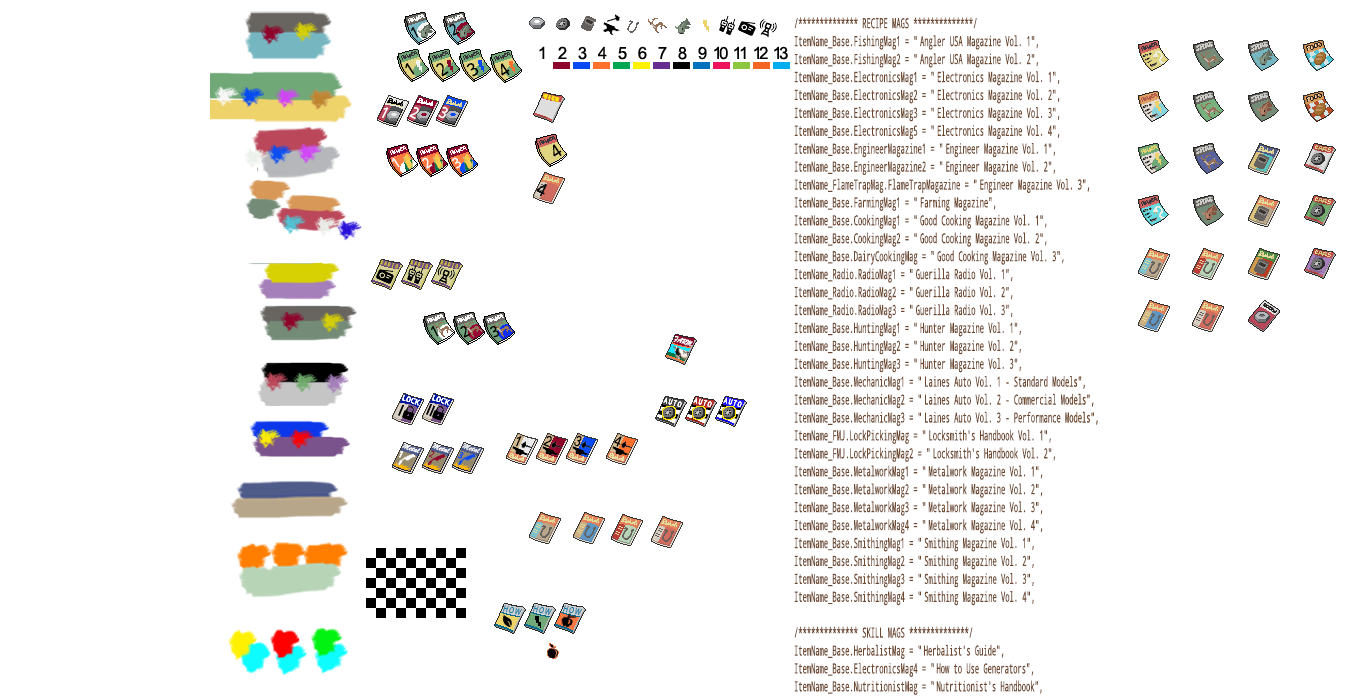
<style>
.page{position:relative;width:1362px;height:700px;background:#ffffff}
.page>*{position:absolute;margin:0}
.t1{font:14px/9px "NotoMono";color:#6e492f;scale:0.51 1}
.t2{font:15.4px "NotoMono";color:#000000;scale:0.9 1}
.t3{font:18.1px "NotoMono";color:#000000;scale:0.9 1}
.t4{font:5.1px "NotoMono";letter-spacing:0.3em;color:#fff000;scale:0.63 1}
.t5{font:5.7px "NotoMono";letter-spacing:0.46em;color:#fff000;scale:0.63 1}
.t6{font:15.5px "NotoMono";color:#ffffff;scale:0.9 1}
.t7{font:14.6px "NotoMono";color:#fbfcfa;scale:0.9 1}
.t8{font:5.7px "NotoMono";letter-spacing:0.46em;color:#d7cc1c;scale:0.63 1}
.t9{font:8.6px "BrushScriptMT";color:#ffffff;scale:0.81 1}
.t10{font:14.9px "ArialNarrow";color:#000000}
.t11{font:8.7px "BrushScriptMT";color:#ffffff}
.t12{font:8.7px "BrushScriptMT";color:#f3f3f3}
.t13{font:9px "NotoMono";color:#ffffff;scale:0.9 1}
.t14{font:9px "NotoMono";color:#8e052b;scale:0.9 1}
.t15{font:9px "NotoMono";color:#074af3;scale:0.9 1}
.t16{font:8.5px "ArialMT";letter-spacing:0.17em;color:#037aa6;scale:0.76 1}
</style>
<div class="page">
<p class="t1" style="left:794px;top:17px;width:304px;height:678px">/************** RECIPE MAGS **************/<br><br>ItemName_Base.FishingMag1 = " Angler USA Magazine Vol. 1",<br><br>ItemName_Base.FishingMag2 = " Angler USA Magazine Vol. 2",<br><br>ItemName_Base.ElectronicsMag1 = " Electronics Magazine Vol. 1",<br><br>ItemName_Base.ElectronicsMag2 = " Electronics Magazine Vol. 2",<br><br>ItemName_Base.ElectronicsMag3 = " Electronics Magazine Vol. 3",<br><br>ItemName_Base.ElectronicsMag5 = " Electronics Magazine Vol. 4",<br><br>ItemName_Base.EngineerMagazine1 = " Engineer Magazine Vol. 1",<br><br>ItemName_Base.EngineerMagazine2 = " Engineer Magazine Vol. 2",<br><br>ItemName_FlameTrapMag.FlameTrapMagazine = " Engineer Magazine Vol. 3",<br><br>ItemName_Base.FarmingMag1 = " Farming Magazine",<br><br>ItemName_Base.CookingMag1 = " Good Cooking Magazine Vol. 1",<br><br>ItemName_Base.CookingMag2 = " Good Cooking Magazine Vol. 2",<br><br>ItemName_Base.DairyCookingMag = " Good Cooking Magazine Vol. 3",<br><br>ItemName_Radio.RadioMag1 = " Guerilla Radio Vol. 1",<br><br>ItemName_Radio.RadioMag2 = " Guerilla Radio Vol. 2",<br><br>ItemName_Radio.RadioMag3 = " Guerilla Radio Vol. 3",<br><br>ItemName_Base.HuntingMag1 = " Hunter Magazine Vol. 1",<br><br>ItemName_Base.HuntingMag2 = " Hunter Magazine Vol. 2",<br><br>ItemName_Base.HuntingMag3 = " Hunter Magazine Vol. 3",<br><br>ItemName_Base.MechanicMag1 = " Laines Auto Vol. 1 - Standard Models",<br><br>ItemName_Base.MechanicMag2 = " Laines Auto Vol. 2 - Commercial Models",<br><br>ItemName_Base.MechanicMag3 = " Laines Auto Vol. 3 - Performance Models",<br><br>ItemName_FMJ.LockPickingMag = " Locksmith's Handbook Vol. 1",<br><br>ItemName_FMJ.LockPickingMag2 = " Locksmith's Handbook Vol. 2",<br><br>ItemName_Base.MetalworkMag1 = " Metalwork Magazine Vol. 1",<br><br>ItemName_Base.MetalworkMag2 = " Metalwork Magazine Vol. 2",<br><br>ItemName_Base.MetalworkMag3 = " Metalwork Magazine Vol. 3",<br><br>ItemName_Base.MetalworkMag4 = " Metalwork Magazine Vol. 4",<br><br>ItemName_Base.SmithingMag1 = " Smithing Magazine Vol. 1",<br><br>ItemName_Base.SmithingMag2 = " Smithing Magazine Vol. 2",<br><br>ItemName_Base.SmithingMag3 = " Smithing Magazine Vol. 3",<br><br>ItemName_Base.SmithingMag4 = " Smithing Magazine Vol. 4",<br><br><br><br>/************** SKILL MAGS **************/<br><br>ItemName_Base.HerbalistMag = " Herbalist's Guide",<br><br>ItemName_Base.ElectronicsMag4 = " How to Use Generators",<br><br>ItemName_Base.NutritionistMag = " Nutritionist's Handbook",</p>
<p class="t2" style="left:411px;top:26px;width:8px;height:12px;rotate:-26deg">1</p>
<p class="t2" style="left:449px;top:24px;width:11px;height:12px;rotate:-26deg">2</p>
<p class="t3" style="left:405px;top:63px;width:10px;height:12px;rotate:-33deg">1</p>
<p class="t3" style="left:436px;top:63px;width:13px;height:14px;rotate:-33deg">2</p>
<p class="t3" style="left:466px;top:63px;width:13px;height:14px;rotate:-33deg">3</p>
<p class="t3" style="left:501px;top:63px;width:9px;height:13px;rotate:-33deg">4</p>
<p class="t4" style="left:542px;top:93px;width:18px;height:9px;rotate:16deg">HEALTH</p>
<p class="t5" style="left:544px;top:94px;width:15px;height:8px;rotate:16deg">HERB</p>
<p class="t5" style="left:544px;top:94px;width:15px;height:8px;rotate:16deg">ELEC</p>
<p class="t6" style="left:382px;top:107px;width:7px;height:12px;rotate:27deg">1</p>
<p class="t6" style="left:409px;top:107px;width:10px;height:13px;rotate:27deg">2</p>
<p class="t6" style="left:438px;top:106px;width:10px;height:13px;rotate:27deg">3</p>
<p class="t3" style="left:553px;top:144px;width:9px;height:13px;rotate:-33deg">4</p>
<p class="t7" style="left:392px;top:157px;width:8px;height:11px;rotate:-33deg">1</p>
<p class="t7" style="left:422px;top:157px;width:11px;height:12px;rotate:-33deg">2</p>
<p class="t7" style="left:451px;top:157px;width:10px;height:12px;rotate:-33deg">3</p>
<p class="t3" style="left:536px;top:183px;width:11px;height:14px;rotate:27deg">4</p>
<p class="t8" style="left:380px;top:260px;width:18px;height:9px;rotate:16deg">RADIO</p>
<p class="t8" style="left:410px;top:260px;width:18px;height:9px;rotate:16deg">RADIO</p>
<p class="t8" style="left:440px;top:260px;width:18px;height:9px;rotate:16deg">RADIO</p>
<p class="t2" style="left:431px;top:325px;width:8px;height:12px;rotate:-26deg">1</p>
<p class="t2" style="left:460px;top:326px;width:11px;height:12px;rotate:-26deg">2</p>
<p class="t2" style="left:489px;top:326px;width:10px;height:12px;rotate:-26deg">3</p>
<p class="t9" style="left:673px;top:336px;width:20px;height:11px;rotate:18deg">FARM</p>
<p class="t10" style="left:516px;top:436px;width:6px;height:11px;rotate:23deg">1</p>
<p class="t10" style="left:543px;top:436px;width:9px;height:12px;rotate:23deg">2</p>
<p class="t10" style="left:574px;top:435px;width:8px;height:12px;rotate:23deg">3</p>
<p class="t10" style="left:614px;top:436px;width:8px;height:11px;rotate:23deg">4</p>
<p class="t11" style="left:402px;top:442px;width:19px;height:11px;rotate:19deg">Metal</p>
<p class="t11" style="left:432px;top:442px;width:19px;height:11px;rotate:19deg">Metal</p>
<p class="t12" style="left:462px;top:442px;width:19px;height:11px;rotate:19deg">Metal</p>
<p class="t13" style="left:399px;top:451px;width:4px;height:7px;rotate:27deg">1</p>
<p class="t13" style="left:399px;top:451px;width:4px;height:7px;rotate:27deg">1</p>
<p class="t13" style="left:399px;top:451px;width:4px;height:7px;rotate:27deg">1</p>
<p class="t14" style="left:428px;top:451px;width:7px;height:7px;rotate:27deg">2</p>
<p class="t15" style="left:457px;top:452px;width:7px;height:7px;rotate:27deg">3</p>
<p class="t15" style="left:457px;top:452px;width:7px;height:7px;rotate:27deg">3</p>
<p class="t16" style="left:503px;top:605px;width:19px;height:10px;rotate:13deg">HOW</p>
<p class="t16" style="left:533px;top:605px;width:19px;height:10px;rotate:13deg">HOW</p>
<p class="t16" style="left:563px;top:605px;width:19px;height:10px;rotate:13deg">HOW</p>
</div>
